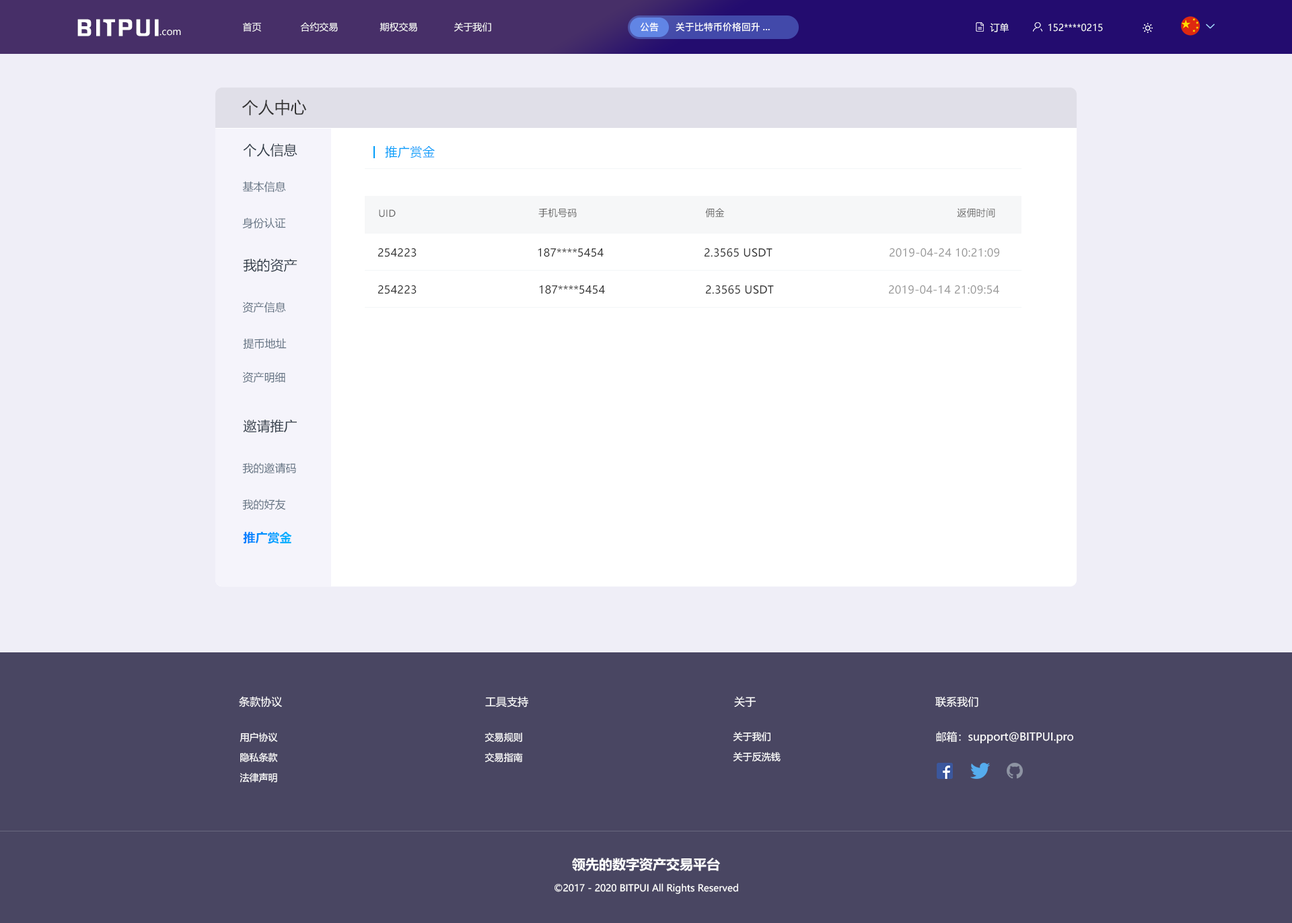
<style>
.page{position:relative;width:1292px;height:923px;background:#efeef7}
.page>*{position:absolute;margin:0}
.t1{font:20.6px "FZHZGBJW--GB1-0";letter-spacing:0.1em;color:#ffffff;scale:1.14 1}
.t2{font:9.4px "MicrosoftYaHei";color:#ffffff}
.t3{font:9.4px "PingFang-SC-Bold";color:#ffffff}
.t4{font:16.2px "MicrosoftYaHei";color:#333333}
.t5{font:13.5px "MicrosoftYaHei";color:#303b47}
.t6{font:12.1px "MicrosoftYaHei";letter-spacing:0.03em;color:#009dfa}
.t7{font:10.8px "MicrosoftYaHei";color:#637282}
.t8{font:9.4px "MicrosoftYaHei";letter-spacing:0.025em;color:#666666}
.t9{font:10.8px "MicrosoftYaHei";letter-spacing:0.025em;color:#333333;text-transform:uppercase}
.t10{font:10.8px "MicrosoftYaHei";letter-spacing:0.025em;color:#333333}
.t11{font:10.8px "MicrosoftYaHei";letter-spacing:0.025em;color:#999999;text-transform:uppercase}
.t12{font:12.1px "MicrosoftYaHei-Bold"}
.t13{font:10.8px "MicrosoftYaHei";color:#ffffff}
.t14{font:9.4px/20.2px "MicrosoftYaHei";color:#ffffff}
.t15{font:13.5px "MicrosoftYaHei-Bold";color:#ffffff}
</style>
<div class="page">
<p class="t1" style="left:77px;top:19px;width:82px;height:17px">BITPUI</p>
<p class="t2" style="left:160px;top:30px;width:21px;height:6px">.com</p>
<p class="t2" style="left:243px;top:22px;width:248px;height:10px">首页              合约交易               期权交易             关于我们</p>
<p class="t3" style="left:640px;top:22px;width:19px;height:10px">公告</p>
<p class="t3" style="left:676px;top:22px;width:94px;height:10px">关于比特币价格回升...</p>
<p class="t2" style="left:990px;top:23px;width:19px;height:9px">订单</p>
<p class="t2" style="left:1049px;top:24px;width:54px;height:8px">152****0215</p>
<p class="t4" style="left:242px;top:100px;width:65px;height:16px">个人中心</p>
<p class="t5" style="left:243px;top:143px;width:54px;height:14px">个人信息</p>
<p class="t6" style="left:385px;top:145px;width:50px;height:13px">推广赏金</p>
<p class="t7" style="left:242px;top:181px;width:44px;height:11px">基本信息</p>
<p class="t8" style="left:379px;top:209px;width:17px;height:8px">UID</p>
<p class="t8" style="left:538px;top:208px;width:39px;height:9px">手机号码</p>
<p class="t8" style="left:705px;top:208px;width:20px;height:9px">佣金</p>
<p class="t8" style="left:957px;top:208px;width:38px;height:9px">返佣时间</p>
<p class="t7" style="left:242px;top:217px;width:44px;height:12px">身份认证</p>
<p class="t9" style="left:378px;top:248px;width:39px;height:9px">254223</p>
<p class="t10" style="left:538px;top:248px;width:66px;height:9px">187****5454</p>
<p class="t10" style="left:705px;top:248px;width:68px;height:9px">2.3565 USDT</p>
<p class="t11" style="left:890px;top:248px;width:109px;height:9px">2019-04-24 10:21:09</p>
<p class="t5" style="left:243px;top:258px;width:54px;height:14px">我的资产</p>
<p class="t9" style="left:378px;top:285px;width:39px;height:9px">254223</p>
<p class="t10" style="left:539px;top:285px;width:66px;height:9px">187****5454</p>
<p class="t10" style="left:706px;top:285px;width:68px;height:9px">2.3565 USDT</p>
<p class="t11" style="left:889px;top:285px;width:110px;height:9px">2019-04-14 21:09:54</p>
<p class="t7" style="left:242px;top:302px;width:44px;height:11px">资产信息</p>
<p class="t7" style="left:243px;top:338px;width:44px;height:11px">提币地址</p>
<p class="t7" style="left:242px;top:372px;width:43px;height:11px">资产明细</p>
<p class="t5" style="left:243px;top:419px;width:54px;height:14px">邀请推广</p>
<p class="t7" style="left:242px;top:462px;width:54px;height:11px">我的邀请码</p>
<p class="t7" style="left:242px;top:499px;width:44px;height:11px">我的好友</p>
<p class="t12" style="left:243px;top:531px;width:49px;height:13px">推广赏金</p>
<p class="t13" style="left:239px;top:696px;width:43px;height:11px">条款协议</p>
<p class="t13" style="left:485px;top:696px;width:43px;height:11px">工具支持</p>
<p class="t13" style="left:734px;top:696px;width:23px;height:11px">关于</p>
<p class="t13" style="left:936px;top:696px;width:43px;height:11px">联系我们</p>
<p class="t14" style="left:240px;top:732px;width:38px;height:50px;text-align:center">用户协议<br>隐私条款<br>法律声明</p>
<p class="t14" style="left:485px;top:732px;width:38px;height:30px">交易规则<br>交易指南</p>
<p class="t14" style="left:733px;top:732px;width:48px;height:29px">关于我们<br>关于反洗钱</p>
<p class="t13" style="left:936px;top:731px;width:138px;height:13px">邮箱：support@BITPUI.pro</p>
<p class="t15" style="left:572px;top:857px;width:148px;height:14px">领先的数字资产交易平台</p>
<p class="t2" style="left:555px;top:883px;width:183px;height:11px">©2017 - 2020 BITPUI All Rights Reserved</p>
</div>
